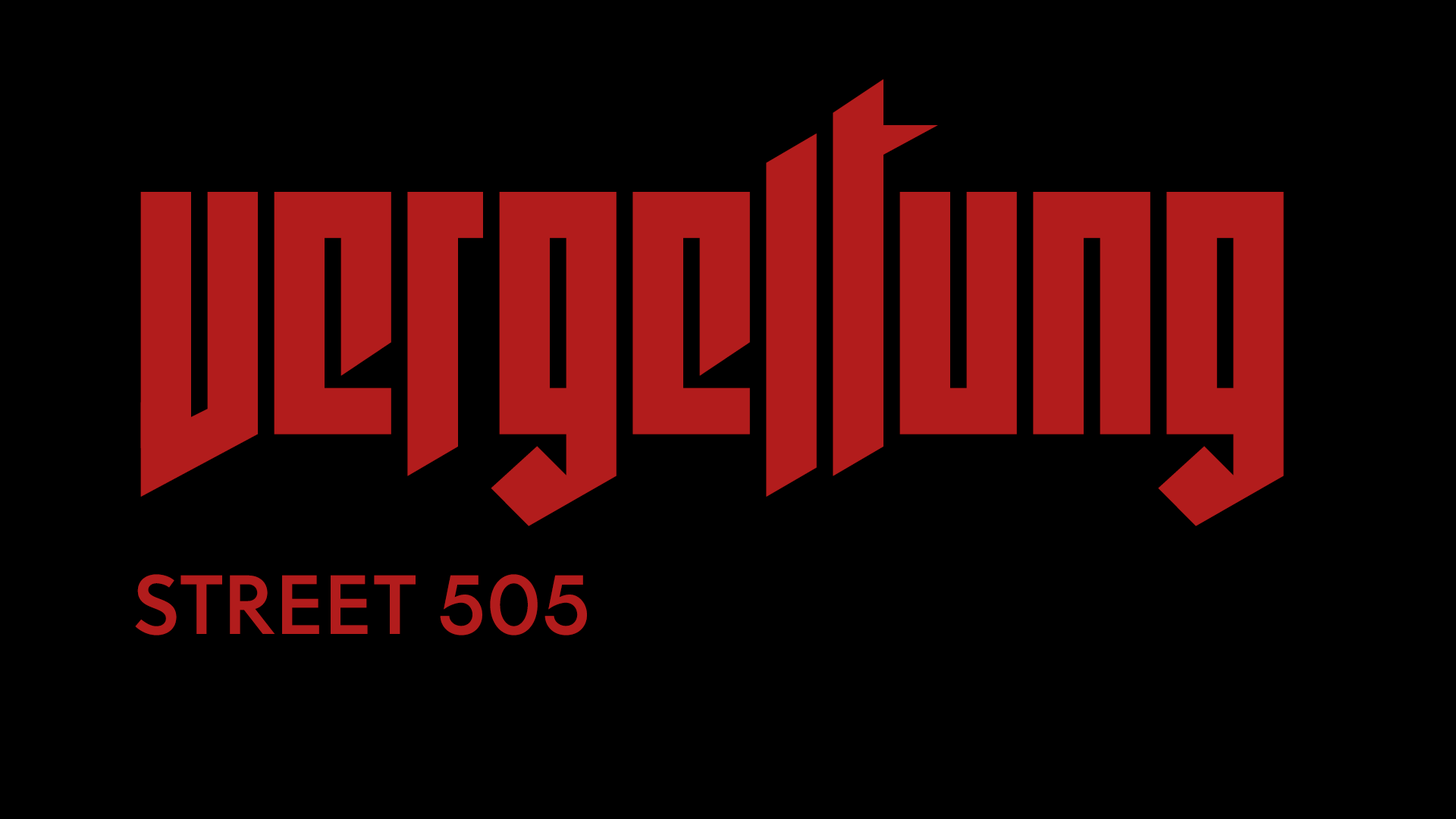
<style>
.page{position:relative;width:1456px;height:819px;background:#000000}
.page>*{position:absolute;margin:0}
.t1{font:417.1px "wolfensteinRUSBYLYAJKA";color:#b21c1c}
.t2{font:83.4px "FONTSPRINGDEMO-CosmataSemiBoldRegular";color:#b21c1c}
</style>
<div class="page">
<p class="t1" style="left:140px;top:79px;width:1144px;height:447px">Vergeltung.</p>
<p class="t2" style="left:135px;top:574px;width:452px;height:61px">STREET 505</p>
</div>
